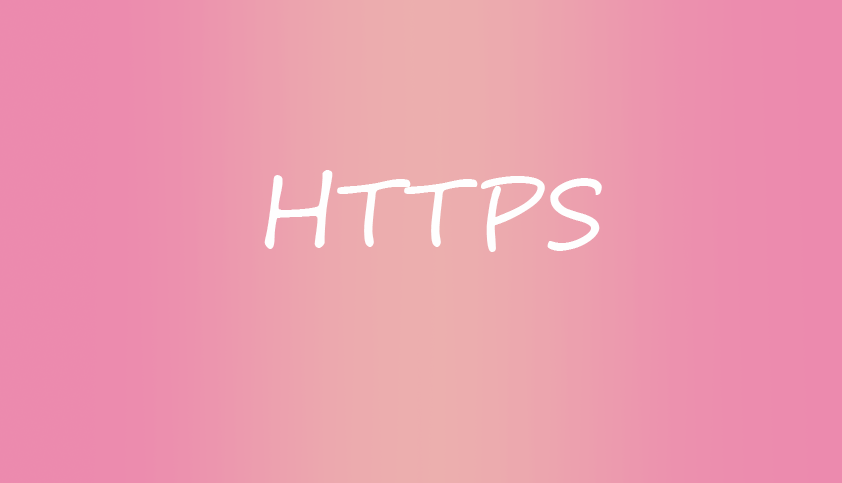
<style>
.page{position:relative;width:842px;height:483px}
.page>*{position:absolute;margin:0}
.t1{font:96px "SegoeScript";color:#fefefe}
</style>
<div class="page">
<p class="t1" style="left:264px;top:170px;width:338px;height:82px">HTTPS</p>
</div>
